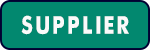
<style>
.page{position:relative;width:150px;height:50px;background:#02886f}
.page>*{position:absolute;margin:0}
.t1{font:22.7px "a-bug's-life-Regular";letter-spacing:0.16em;color:#fafafa;text-transform:uppercase;scale:0.96 1}
.t2{font:22.7px "a-bug's-life-Regular";letter-spacing:0.16em;color:#fafafa;scale:0.96 1}
</style>
<div class="page">
<p class="t1" style="left:21px;top:15px;width:108px;height:20px"><span class="t2">S</span>upplier</p>
</div>
